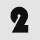
<style>
.page{position:relative;width:40px;height:40px;background:#e4e4e4}
.page>*{position:absolute;margin:0}
.t1{font:37.4px "Bauhaus93";color:#101010;font-weight:bold}
</style>
<div class="page">
<p class="t1" style="left:10px;top:6px;width:19px;height:27px">2</p>
</div>
